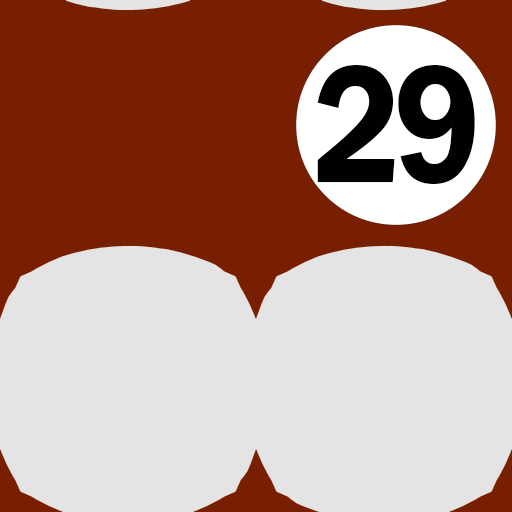
<style>
.page{position:relative;width:512px;height:512px;background:#e4e4e4}
.page>*{position:absolute;margin:0}
.t1{font:172.5px "FranklinGothic-Demi";letter-spacing:-0.05em;color:#010101;scale:0.87 1}
</style>
<div class="page">
<p class="t1" style="left:317px;top:65px;width:158px;height:119px">29</p>
</div>
